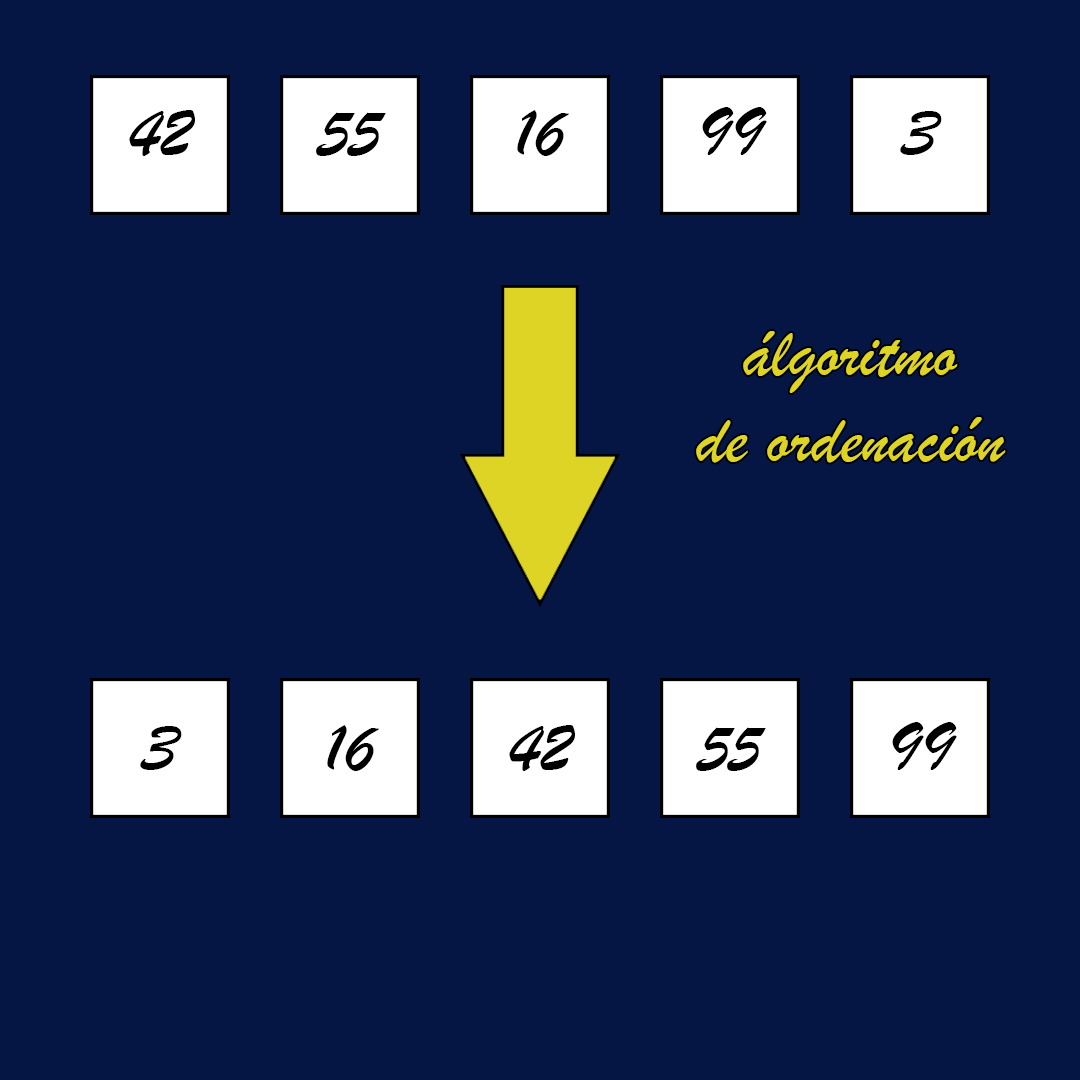
<style>
.page{position:relative;width:1080px;height:1080px;background:#051645}
.page>*{position:absolute;margin:0}
.t1{font:72px "BrushScriptMT";color:#000000}
.t2{font:72px "BrushScriptMT";color:#ddd426}
</style>
<div class="page">
<p class="t1" style="left:129px;top:110px;width:66px;height:46px">42</p>
<p class="t1" style="left:316px;top:112px;width:70px;height:44px">55</p>
<p class="t1" style="left:517px;top:110px;width:52px;height:46px">16</p>
<p class="t1" style="left:702px;top:107px;width:65px;height:48px">99</p>
<p class="t1" style="left:900px;top:111px;width:42px;height:44px">3</p>
<p class="t2" style="left:696px;top:331px;width:310px;height:132px;text-align:center">álgoritmo <br>de ordenación</p>
<p class="t1" style="left:140px;top:726px;width:42px;height:44px">3</p>
<p class="t1" style="left:327px;top:725px;width:52px;height:46px">16</p>
<p class="t1" style="left:509px;top:725px;width:66px;height:46px">42</p>
<p class="t1" style="left:892px;top:722px;width:65px;height:48px">99</p>
<p class="t1" style="left:696px;top:727px;width:70px;height:44px">55</p>
</div>
